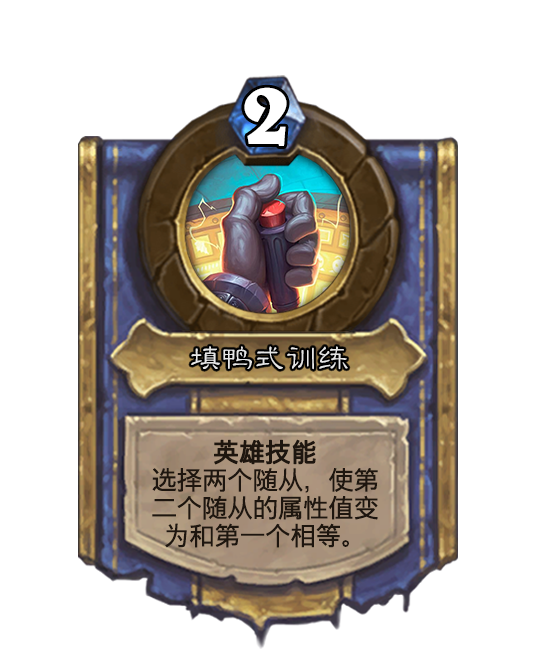
<style>
.page{position:relative;width:536px;height:670px;background:#ffffff}
.page>*{position:absolute;margin:0}
.t1{font:92.8px "BelweBT-Bold";color:#ffffff}
.t2{font:31.8px "GBJenLei-Medium";color:#e6e6e6}
.t3{font:25.2px/27.9px "BlizzardGlobal-Regular";color:#1e160f}
.t4{font:25.2px/27.9px "BlizzardGlobal-Regular";color:#1e160f;font-weight:bold}
</style>
<div class="page">
<p class="t1" style="left:244px;top:87px;width:43px;height:59px">2</p>
<p class="t2" style="left:191px;top:346px;width:157px;height:24px">填鸭式训练</p>
<p class="t3" style="left:152px;top:439px;width:226px;height:109px;text-align:center"><span class="t4">英雄技能<br></span>选择两个随从，使第<br>二个随从的属性值变<br>为和第一个相等。</p>
</div>
